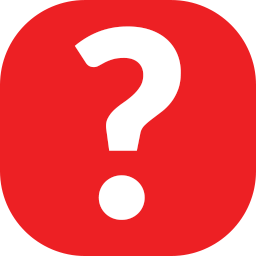
<style>
.page{position:relative;width:256px;height:256px;background:#ed2024}
.page>*{position:absolute;margin:0}
.t1{font:260px "Lato-Black";color:#ffffff}
</style>
<div class="page">
<p class="t1" style="left:74px;top:26px;width:107px;height:194px">?</p>
</div>
